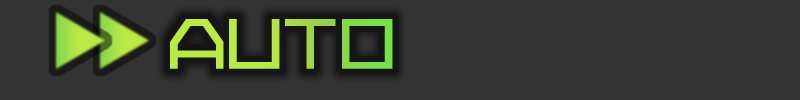
<style>
.page{position:relative;width:800px;height:100px;background:#333333}
.page>*{position:absolute;margin:0}
.t1{font:56px "7THDR2020ThinRegular";letter-spacing:-0.02em;font-weight:bold}
</style>
<div class="page">
<p class="t1" style="left:170px;top:19px;width:223px;height:50px">auto</p>
</div>
